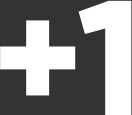
<style>
.page{position:relative;width:132px;height:115px;background:#333333}
.page>*{position:absolute;margin:0}
.t1{font:163px "Gilroy-ExtraBold";letter-spacing:-0.04em;color:#ffffff;text-transform:uppercase}
</style>
<div class="page">
<p class="t1" style="left:0px;top:0px;width:132px;height:115px">+1</p>
</div>
